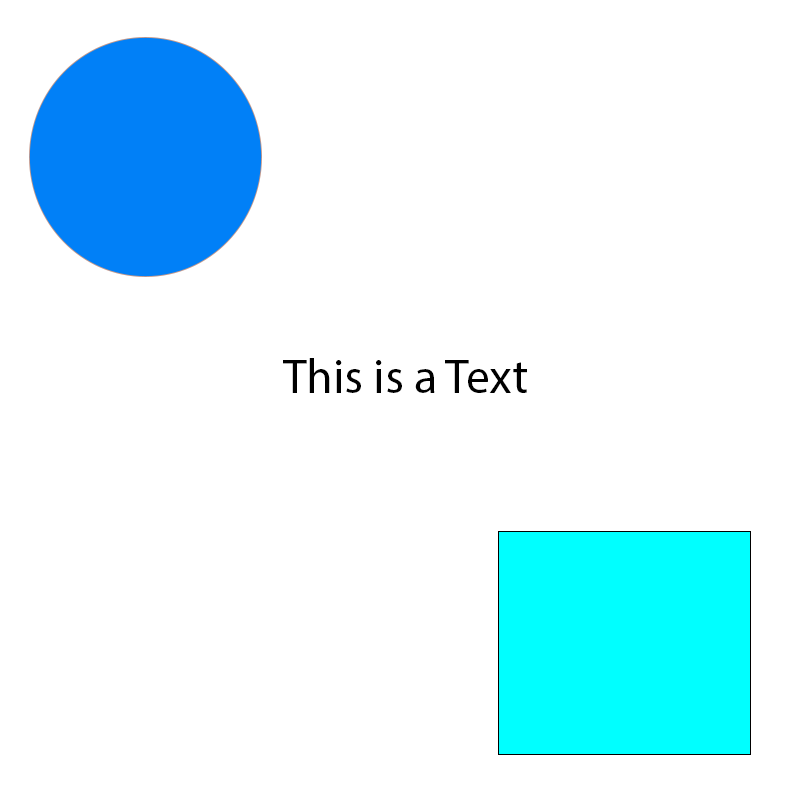
<style>
.page{position:relative;width:800px;height:800px;background:#ffffff}
.page>*{position:absolute;margin:0}
.t1{font:48px "MyriadPro-Regular";color:#000000}
</style>
<div class="page">
<p class="t1" style="left:283px;top:358px;width:244px;height:35px">This is a Text</p>
</div>
